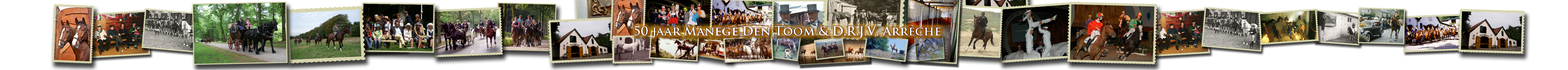
<style>
.page{position:relative;width:1568px;height:70px;background:#ffffff}
.page>*{position:absolute;margin:0}
.t1{font:12.1px "TrajanPro-Bold";letter-spacing:0.005em;color:#ffffff}
</style>
<div class="page">
<p class="t1" style="left:634px;top:25px;width:307px;height:14px">50 jaar Manege Den Toom &amp; D.R.J.V. Arrêche</p>
</div>
